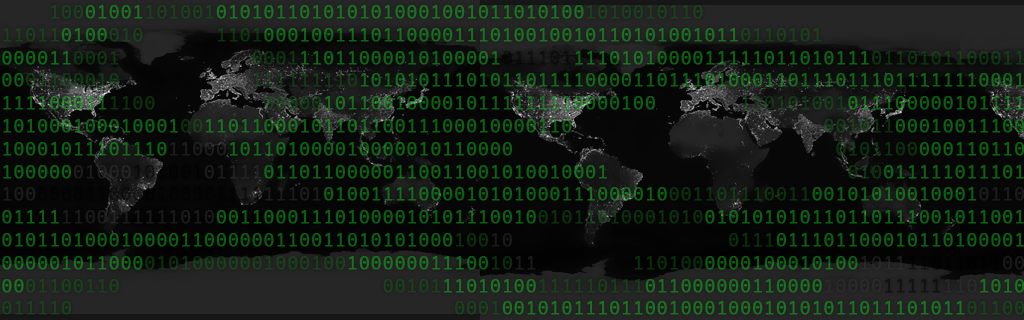
<style>
.page{position:relative;width:1024px;height:320px}
.page>*{position:absolute;margin:0}
.t1{font:19px "AndaleMono";color:#12bb1e;font-weight:bold}
.t2{font:19px "AndaleMono";color:#0f5914;font-weight:bold}
.t3{font:19px "AndaleMono";color:#000000;font-weight:bold}
.t4{font:19px "AndaleMono";color:#2f2f2f;font-weight:bold}
.t5{font:19px "AndaleMono";color:#303030;font-weight:bold}
</style>
<div class="page">
<p class="t1" style="left:2px;top:5px;width:1023px;height:310px;opacity:0.5"><span class="t2">100</span>01001<span class="t2">101001</span>0101011010101010001001011010100<span class="t2">1010010110                           <br>11011</span>0100<span class="t2">010      1101</span>0001001110110000111010010010110101001011<span class="t2">0110101                 <br></span>000011<span class="t2">0001           0001</span>11011000010100001<span class="t3">011101</span>1110101000011111011010111<span class="t2">0110101100011<br></span>00<span class="t2">01100010           111111110</span>10101011101011011110000110111010001101110111011111110001<br>111100011<span class="t2">1100         00000</span>1011001000010111111110000100       <span class="t2">110101001</span>011100000101111<br>101000100010001<span class="t2">00</span>1101100010110110011100010000110                     <span class="t2">001011</span>00010011100<br>10001011101110<span class="t4">11000</span>101101000010000010110000                           <span class="t2">0101100</span>000110110<br>100000<span class="t5">01000</span><span class="t3">101001</span><span class="t4">01111</span>01101100000110011001010010001                    <span class="t2">010</span>011111011101<br><span class="t4">100</span><span class="t3">0000110000100001111</span><span class="t4">11101</span>01001111000010101000111000010<span class="t2">001101110011</span>00101010010001<span class="t4">0110<br></span>01111<span class="t4">1100111111010</span>001100011101000010101110010<span class="t2">01011010001010</span>010101010110110111001011001<br>01011010001000011000000110011010101000<span class="t2">100</span><span class="t4">10                  </span><span class="t2">0111</span>011101100010110100001<br>000001011000<span class="t2">01010000001000100</span>100000011100<span class="t2">10</span><span class="t4">11        </span><span class="t2">110100</span>0000100010100<span class="t4">1011</span><span class="t3">11011011</span><span class="t4">00<br></span>00<span class="t2">01100110                      00101</span>11010100<span class="t2">111110111</span>011000000110000<span class="t4">10000</span><span class="t3">11111</span><span class="t4">110</span>1010<br><span class="t2">011110                                0001</span>001010111011001000100010101011011101011<span class="t2">01100</span></p>
</div>
